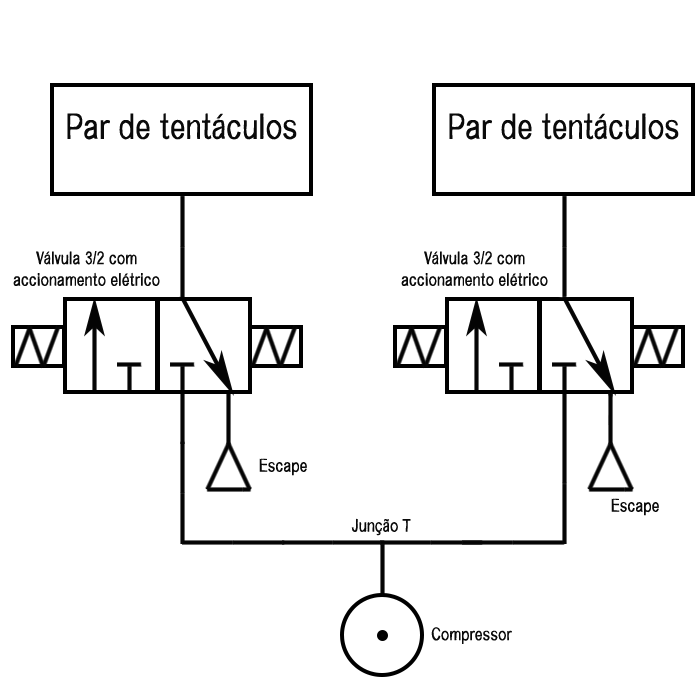
<style>
.page{position:relative;width:700px;height:700px;background:#ffffff}
.page>*{position:absolute;margin:0}
.t1{font:18px "Musicforemptyapartments";color:#0a0a0a}
</style>
<div class="page">
<p class="t1" style="left:13px;top:251px;width:147px;height:35px;text-align:center">Válvula 3/2 com accionamento elétrico</p>
<p class="t1" style="left:401px;top:251px;width:147px;height:35px;text-align:center">Válvula 3/2 com accionamento elétrico</p>
<p class="t1" style="left:259px;top:458px;width:48px;height:18px">Escape</p>
<p class="t1" style="left:611px;top:498px;width:48px;height:18px">Escape</p>
<p class="t1" style="left:351px;top:518px;width:60px;height:18px">Junção T</p>
<p class="t1" style="left:431px;top:627px;width:81px;height:17px">Compressor</p>
</div>
